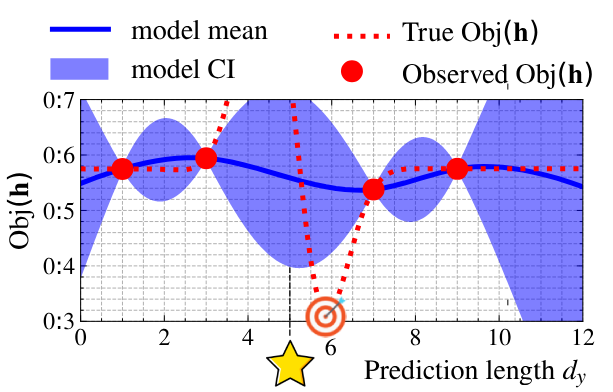
<style>
.page{position:relative;width:613px;height:392px;background:#ffffff}
.page>*{position:absolute;margin:0}
.t1{font:28px "NimbusRomNo9L-Reg";color:#000000}
.t2{font:28px/39.6px "NimbusRomNo9L-Reg";color:#000000}
.t3{font:28px/41.9px "NimbusRomNo9L-Reg";color:#000000}
.t4{font:28px/39.6px "CMR10";color:#000000}
.t5{font:28px/39.6px "NimbusRomNo9L-Med";color:#000000}
.t6{font:28px/41.9px "CMR10";color:#000000}
.t7{font:28px/41.9px "NimbusRomNo9L-Med";color:#000000}
.t8{font:24px "NimbusRomNo9L-Reg";color:#000000}
.t9{font:24px "CMMI10";color:#000000}
.t10{font:28px "CMR10";color:#000000}
.t11{font:28px "NimbusRomNo9L-Med";color:#000000}
.t12{font:28px "NimbusRomNo9L-RegIta";color:#000000}
.t13{font:21px "NimbusRomNo9L-RegIta";color:#000000}
</style>
<div class="page">
<p class="t1" style="left:131px;top:19px;width:137px;height:60px">model mean<span class="t2"><br>model CI</span></p>
<p class="t3" style="left:402px;top:19px;width:190px;height:71px"><span class="t2">True Obj</span><span class="t4">(</span><span class="t5">h</span><span class="t4">)</span><br>Observed Obj<span class="t6">(</span><span class="t7">h</span><span class="t6">)</span></p>
<p class="t8" style="left:43px;top:91px;width:32px;height:18px">0<span class="t9">:</span>7</p>
<p class="t8" style="left:43px;top:146px;width:32px;height:18px">0<span class="t9">:</span>6</p>
<p class="t10" style="left:6px;top:173px;width:26px;height:7px;rotate:-90deg">)</p>
<p class="t11" style="left:9px;top:182px;width:20px;height:15px;rotate:-90deg">h</p>
<p class="t10" style="left:6px;top:199px;width:26px;height:7px;rotate:-90deg">(</p>
<p class="t8" style="left:43px;top:202px;width:31px;height:18px">0<span class="t9">:</span>5</p>
<p class="t1" style="left:8px;top:210px;width:27px;height:40px;rotate:-90deg">Obj</p>
<p class="t8" style="left:43px;top:257px;width:32px;height:18px">0<span class="t9">:</span>4</p>
<p class="t8" style="left:43px;top:312px;width:31px;height:18px">0<span class="t9">:</span>3</p>
<p class="t8" style="left:75px;top:328px;width:12px;height:18px">0</p>
<p class="t8" style="left:159px;top:328px;width:11px;height:17px">2</p>
<p class="t8" style="left:242px;top:328px;width:12px;height:17px">4</p>
<p class="t8" style="left:410px;top:328px;width:11px;height:18px">8</p>
<p class="t8" style="left:489px;top:328px;width:22px;height:18px">10</p>
<p class="t8" style="left:573px;top:328px;width:22px;height:17px">12</p>
<p class="t8" style="left:325px;top:338px;width:11px;height:18px">6</p>
<p class="t1" style="left:364px;top:359px;width:214px;height:27px">Prediction length<span class="t12"> d</span></p>
<p class="t13" style="left:575px;top:373px;width:11px;height:15px">y</p>
</div>
